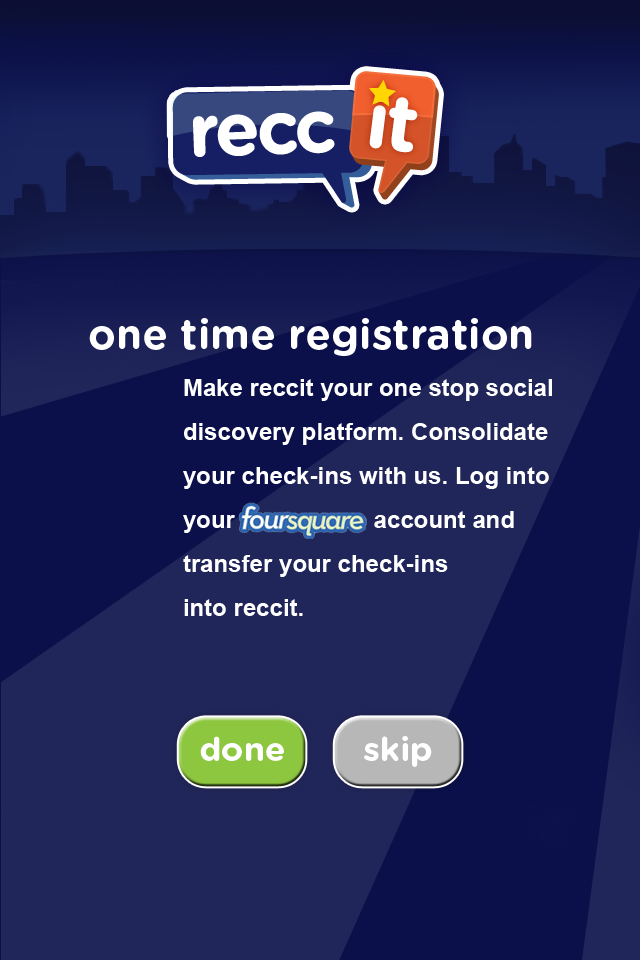
<style>
.page{position:relative;width:640px;height:960px;background:#21265a}
.page>*{position:absolute;margin:0}
.t1{font:41.8px "GothamRounded-Bold";color:#ffffff}
.t2{font:24px/44px "Arial-BoldMT";color:#ffffff}
.t3{font:33.7px "GothamRounded-Bold";color:#ffffff}
</style>
<div class="page">
<p class="t1" style="left:89px;top:318px;width:443px;height:38px">one time registration</p>
<p class="t2" style="left:183px;top:379px;width:369px;height:237px">Make reccit your one stop social <br>discovery platform. Consolidate <br>your check-ins with us. Log into <br>your foursquare account and <br>transfer your check-ins <br>into reccit.</p>
<p class="t3" style="left:200px;top:736px;width:84px;height:25px">done</p>
<p class="t3" style="left:364px;top:736px;width:68px;height:31px">skip</p>
</div>
